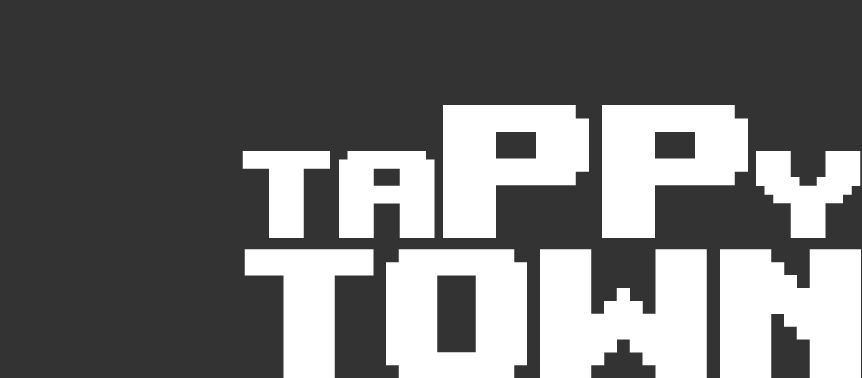
<style>
.page{position:relative;width:862px;height:378px;background:#333333}
.page>*{position:absolute;margin:0}
.t1{font:265.5px "UpheavalPro-Regular";color:#ffffff}
.t2{font:173.7px "UpheavalPro-Regular";color:#ffffff}
.t3{font:256.9px "UpheavalPro-Regular";color:#ffffff}
</style>
<div class="page">
<p class="t1" style="left:443px;top:105px;width:305px;height:133px">pp</p>
<p class="t2" style="left:242px;top:151px;width:193px;height:87px">ta</p>
<p class="t2" style="left:756px;top:151px;width:105px;height:87px">y</p>
<p class="t3" style="left:244px;top:249px;width:617px;height:129px">town</p>
</div>
